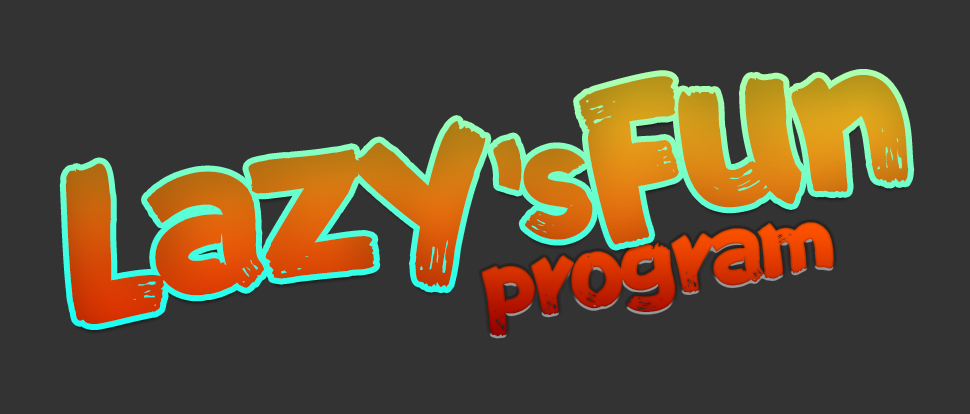
<style>
.page{position:relative;width:970px;height:414px;background:#333333}
.page>*{position:absolute;margin:0}
.t1{font:194px "FZFENSTXJW--GB1-0";letter-spacing:-0.08em}
.t2{font:133px "FZFENSTXJW--GB1-0";letter-spacing:-0.72em}
.t3{font:133px "FZFENSTXJW--GB1-0";letter-spacing:-0.08em}
.t4{font:90px "FZFENSTXJW--GB1-0";letter-spacing:-0.08em}
</style>
<div class="page">
<p class="t1" style="left:65px;top:75px;width:844px;height:250px;rotate:-9deg">Lazy<span class="t2">’</span><span class="t3">s</span>Fun</p>
<p class="t4" style="left:481px;top:222px;width:353px;height:115px;rotate:-9deg">program</p>
</div>
